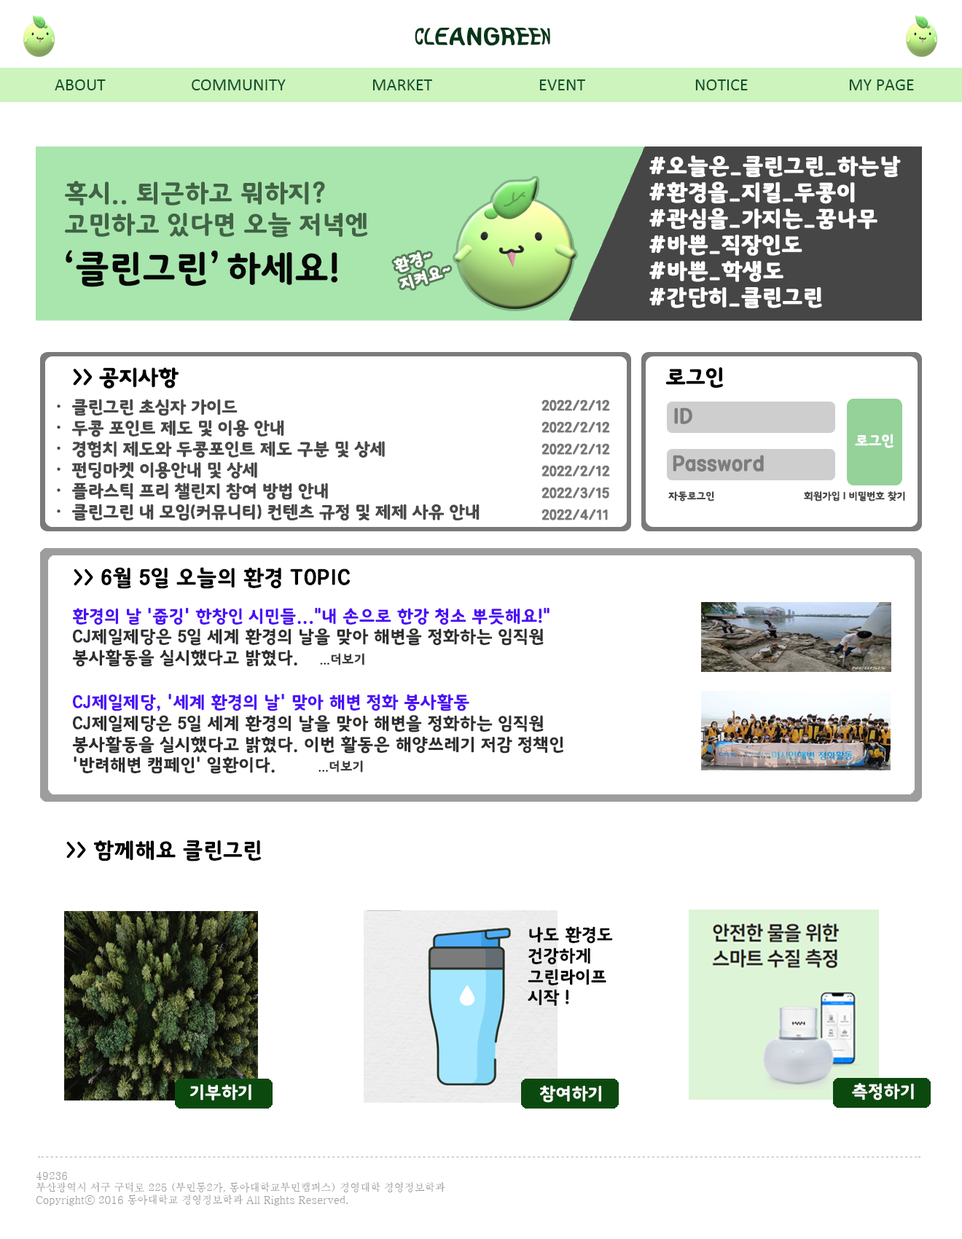
<style>
.page{position:relative;width:962px;height:1239px;background:#ffffff}
.page>*{position:absolute;margin:0}
.t1{font:21.9px "KoreanSST-R";color:#063718}
.t2{font:17.5px "Calibri";color:#11532e}
.t3{font:17.5px "Calibri";color:#12522e}
.t4{font:21.9px "KoreanSST-R";color:#ffffff;font-weight:bold}
.t5{font:25.7px "KoreanSST-R";color:#426345}
.t6{font:36.6px "KoreanSST-R";color:#070707}
.t7{font:15.4px "KoreanSST-R";color:#ffffff;font-weight:bold}
.t8{font:21.9px "KoreanSST-R";letter-spacing:-0.02em;color:#000000}
.t9{font:17.5px "KoreanSST-R";letter-spacing:-0.02em;color:#494949}
.t10{font:14.6px/21.9px "KoreanSST-R";letter-spacing:-0.02em;color:#797777}
.t11{font:21.9px "KoreanSST-R";letter-spacing:-0.02em;color:#7d7d7d}
.t12{font:14.6px "KoreanSST-R";letter-spacing:-0.02em;color:#ffffff}
.t13{font:10.2px "KoreanSST-R";letter-spacing:-0.02em;color:#494949}
.t14{font:21.9px "KoreanSST-R";color:#000000}
.t15{font:17.5px "KoreanSST-R";color:#2f2f2f}
.t16{font:17.5px "KoreanSST-R";color:#4b0ff7}
.t17{font:10.2px "KoreanSST-R";color:#000000}
.t18{font:13.1px "KoreanSST-R";color:#403d3d}
.t19{font:21.9px "KoreanSST-R";color:#010101}
.t20{font:17.5px "KoreanSST-R";color:#070707}
.t21{font:17.5px "KoreanSST-R";color:#ffffff}
.t22{font:17.5px "KoreanSST-R";color:#fefefe}
.t23{font:10.2px "H2mjsM";color:#a0a0a0}
</style>
<div class="page">
<p class="t1" style="left:415px;top:27px;width:135px;height:19px">CLEANGREEN</p>
<p class="t2" style="left:55px;top:79px;width:51px;height:11px">ABOUT</p>
<p class="t3" style="left:192px;top:79px;width:94px;height:11px">COMMUNITY</p>
<p class="t3" style="left:373px;top:79px;width:59px;height:11px">MARKET</p>
<p class="t3" style="left:539px;top:79px;width:46px;height:11px">EVENT</p>
<p class="t3" style="left:695px;top:79px;width:53px;height:11px">NOTICE</p>
<p class="t3" style="left:849px;top:79px;width:65px;height:11px">MY PAGE</p>
<p class="t4" style="left:650px;top:155px;width:251px;height:153px">#오늘은_클린그린_하는날<br>#환경을_지킬_두콩이<br>#관심을_가지는_꿈나무<br>#바쁜_직장인도<br>#바쁜_학생도<br>#간단히_클린그린</p>
<p class="t5" style="left:65px;top:181px;width:303px;height:57px">혹시.. 퇴근하고 뭐하지?<br>고민하고 있다면 오늘 저녁엔</p>
<p class="t6" style="left:66px;top:250px;width:272px;height:37px">‘클린그린’하세요!</p>
<p class="t7" style="left:394px;top:252px;width:56px;height:37px;rotate:-17deg">환경~<br>지켜요~</p>
<p class="t8" style="left:73px;top:367px;width:106px;height:22px">&gt;&gt; 공지사항</p>
<p class="t8" style="left:666px;top:367px;width:57px;height:21px">로그인</p>
<p class="t9" style="left:57px;top:399px;width:423px;height:122px">ㆍ 클린그린 초심자 가이드<br>ㆍ 두콩 포인트 제도 및 이용 안내<br>ㆍ 경험치 제도와 두콩포인트 제도 구분 및 상세<br>ㆍ 펀딩마켓 이용안내 및 상세<br>ㆍ 플라스틱 프리 챌린지 참여 방법 안내<br>ㆍ 클린그린 내 모임(커뮤니티) 컨텐츠 규정 및 제제 사유 안내</p>
<p class="t10" style="left:542px;top:399px;width:68px;height:121px">2022/2/12<br>2022/2/12<br>2022/2/12<br>2022/2/12<br>2022/3/15<br>2022/4/11</p>
<p class="t11" style="left:674px;top:407px;width:19px;height:17px">ID</p>
<p class="t12" style="left:855px;top:434px;width:39px;height:14px">로그인</p>
<p class="t11" style="left:673px;top:455px;width:91px;height:17px">Password</p>
<p class="t13" style="left:668px;top:491px;width:46px;height:11px">자동로그인</p>
<p class="t13" style="left:804px;top:491px;width:101px;height:11px">회원가입 l 비밀번호 찾기</p>
<p class="t14" style="left:74px;top:567px;width:276px;height:22px">&gt;&gt; 6월 5일 오늘의 환경 TOPIC</p>
<p class="t15" style="left:72px;top:608px;width:478px;height:59px"><span class="t16">환경의 날 '줍깅' 한창인 시민들..."내 손으로 한강 청소 뿌듯해요!"<br></span>CJ제일제당은 5일 세계 환경의 날을 맞아 해변을 정화하는 임직원 <br>봉사활동을 실시했다고 밝혔다.    <span class="t17">...</span><span class="t18">더보기</span></p>
<p class="t15" style="left:72px;top:694px;width:491px;height:80px"><span class="t16">CJ제일제당, '세계 환경의 날' 맞아 해변 정화 봉사활동<br></span>CJ제일제당은 5일 세계 환경의 날을 맞아 해변을 정화하는 임직원 <br>봉사활동을 실시했다고 밝혔다. 이번 활동은 해양쓰레기 저감 정책인 <br>'반려해변 캠페인' 일환이다.        <span class="t17">...</span><span class="t18">더보기</span></p>
<p class="t19" style="left:66px;top:840px;width:195px;height:22px">&gt;&gt; 함께해요 클린그린</p>
<p class="t20" style="left:528px;top:927px;width:85px;height:80px">나도 환경도 <br>건강하게 <br>그린라이프 <br>시작 !</p>
<p class="t21" style="left:190px;top:1084px;width:61px;height:17px">기부하기</p>
<p class="t22" style="left:540px;top:1085px;width:61px;height:18px">참여하기</p>
<p class="t22" style="left:852px;top:1083px;width:62px;height:18px">측정하기</p>
<p class="t23" style="left:36px;top:1172px;width:409px;height:34px">49236<br>부산광역시 서구 구덕로 225 (부민동2가, 동아대학교부민캠퍼스) 경영대학 경영정보학과<br>Copyrightⓒ 2016 동아대학교 경영정보학과 All Rights Reserved.</p>
</div>
